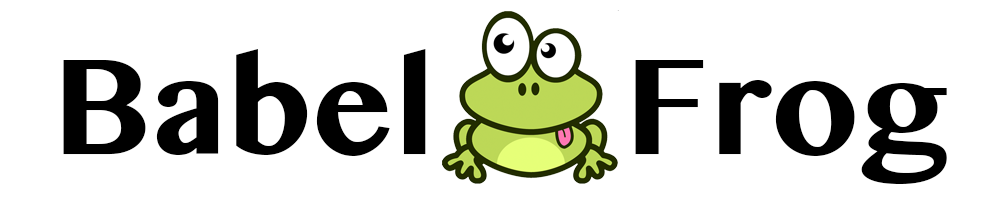
<style>
.page{position:relative;width:1000px;height:200px;background:#ffffff}
.page>*{position:absolute;margin:0}
.t1{font:144px "TeluguMN-Bold";color:#000000}
</style>
<div class="page">
<p class="t1" style="left:63px;top:49px;width:884px;height:135px">Babel     Frog</p>
</div>
